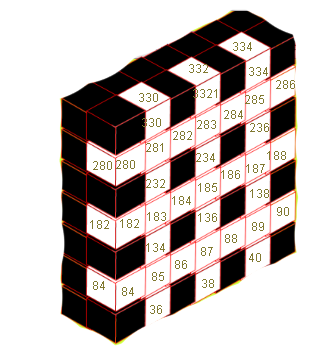
<style>
.page{position:relative;width:323px;height:356px;background:#ffffff}
.page>*{position:absolute;margin:0}
.t1{font:12px "ArialMT";color:#817931}
</style>
<div class="page">
<p class="t1" style="left:233px;top:42px;width:19px;height:9px">334</p>
<p class="t1" style="left:189px;top:64px;width:19px;height:9px">332</p>
<p class="t1" style="left:249px;top:67px;width:19px;height:9px">334</p>
<p class="t1" style="left:193px;top:89px;width:24px;height:9px">3321</p>
<p class="t1" style="left:276px;top:80px;width:19px;height:9px">286</p>
<p class="t1" style="left:139px;top:93px;width:19px;height:9px">330</p>
<p class="t1" style="left:245px;top:95px;width:19px;height:9px">285</p>
<p class="t1" style="left:224px;top:110px;width:19px;height:9px">284</p>
<p class="t1" style="left:142px;top:118px;width:19px;height:9px">330</p>
<p class="t1" style="left:197px;top:120px;width:19px;height:9px">283</p>
<p class="t1" style="left:250px;top:123px;width:19px;height:9px">236</p>
<p class="t1" style="left:173px;top:131px;width:19px;height:9px">282</p>
<p class="t1" style="left:146px;top:143px;width:17px;height:9px">281</p>
<p class="t1" style="left:93px;top:161px;width:19px;height:9px">280</p>
<p class="t1" style="left:116px;top:160px;width:19px;height:9px">280</p>
<p class="t1" style="left:196px;top:153px;width:19px;height:9px">234</p>
<p class="t1" style="left:267px;top:151px;width:19px;height:9px">188</p>
<p class="t1" style="left:221px;top:170px;width:19px;height:9px">186</p>
<p class="t1" style="left:246px;top:164px;width:19px;height:9px">187</p>
<p class="t1" style="left:146px;top:179px;width:19px;height:9px">232</p>
<p class="t1" style="left:198px;top:183px;width:19px;height:9px">185</p>
<p class="t1" style="left:172px;top:196px;width:19px;height:9px">184</p>
<p class="t1" style="left:250px;top:189px;width:19px;height:9px">138</p>
<p class="t1" style="left:277px;top:207px;width:12px;height:9px">90</p>
<p class="t1" style="left:90px;top:220px;width:19px;height:9px">182</p>
<p class="t1" style="left:120px;top:219px;width:19px;height:9px">182</p>
<p class="t1" style="left:147px;top:212px;width:19px;height:9px">183</p>
<p class="t1" style="left:198px;top:213px;width:19px;height:9px">136</p>
<p class="t1" style="left:252px;top:222px;width:12px;height:9px">89</p>
<p class="t1" style="left:146px;top:243px;width:19px;height:9px">134</p>
<p class="t1" style="left:225px;top:234px;width:12px;height:9px">88</p>
<p class="t1" style="left:201px;top:247px;width:12px;height:9px">87</p>
<p class="t1" style="left:249px;top:253px;width:12px;height:9px">40</p>
<p class="t1" style="left:175px;top:260px;width:12px;height:9px">86</p>
<p class="t1" style="left:93px;top:281px;width:12px;height:9px">84</p>
<p class="t1" style="left:152px;top:272px;width:12px;height:9px">85</p>
<p class="t1" style="left:202px;top:279px;width:12px;height:9px">38</p>
<p class="t1" style="left:122px;top:287px;width:12px;height:9px">84</p>
<p class="t1" style="left:150px;top:305px;width:12px;height:9px">36</p>
</div>
